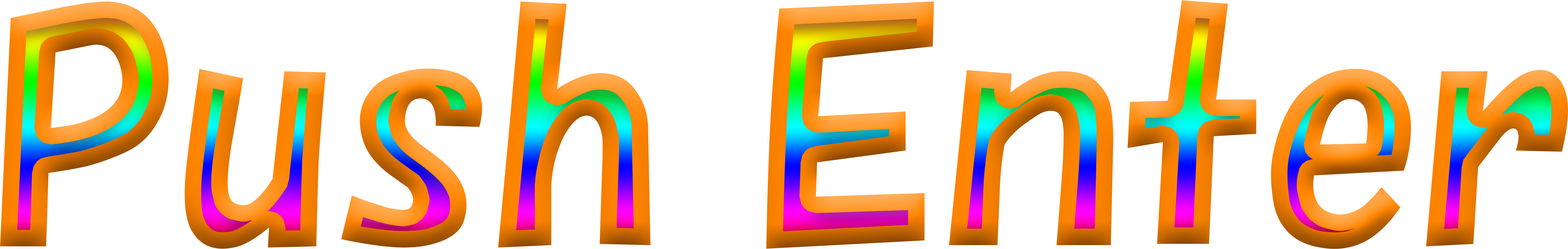
<style>
.page{position:relative;width:1568px;height:249px;background:#ffffff}
.page>*{position:absolute;margin:0}
.t1{font:302.2px "HGPSoeiKakupoptai"}
</style>
<div class="page">
<p class="t1" style="left:0px;top:0px;width:1568px;height:249px">Push Enter</p>
</div>
